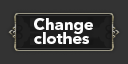
<style>
.page{position:relative;width:128px;height:64px;background:#333333}
.page>*{position:absolute;margin:0}
.t1{font:16px/14px "AvenirNextLTPro-Bold";color:#fdfdfd}
</style>
<div class="page">
<p class="t1" style="left:34px;top:18px;width:59px;height:26px">Change<br>clothes</p>
</div>
